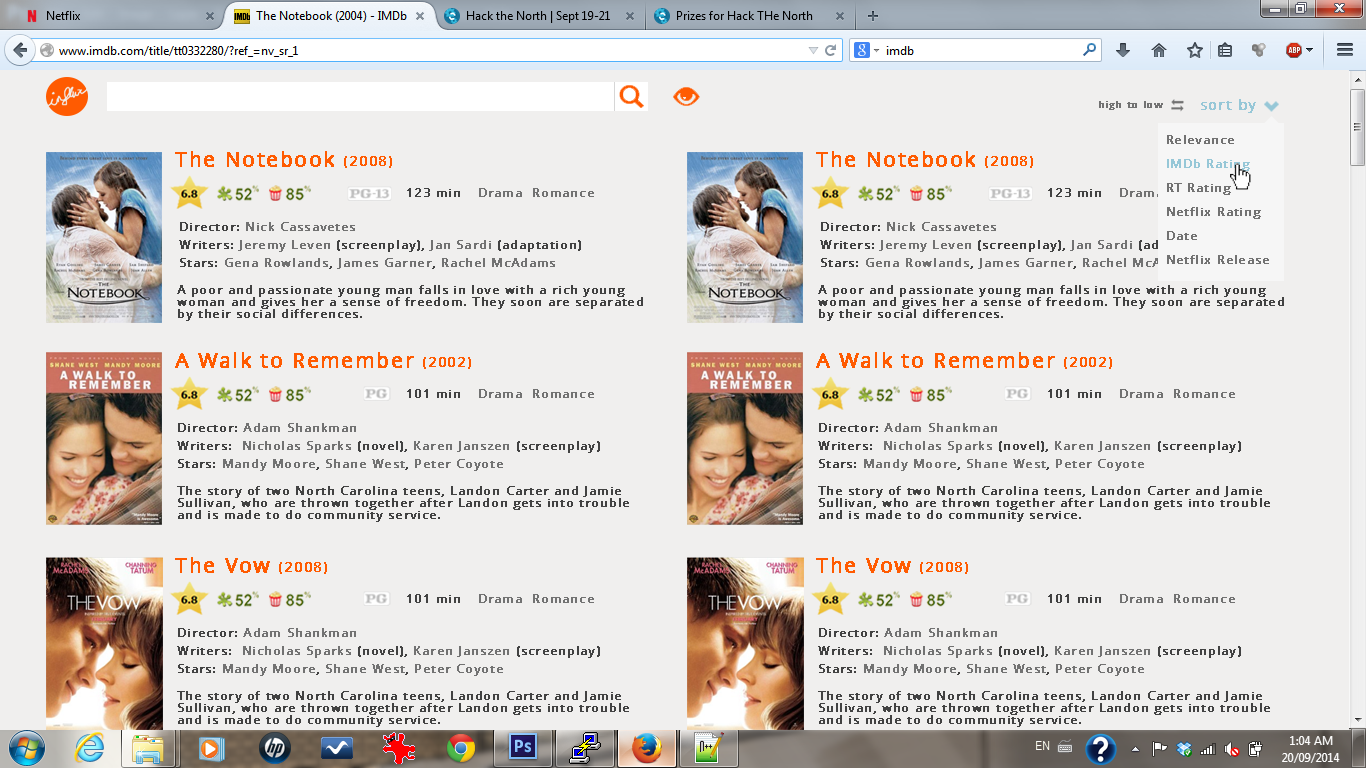
<style>
.page{position:relative;width:1366px;height:768px;background:#f0efee}
.page>*{position:absolute;margin:0}
.t1{font:10px "OpenSans";letter-spacing:0.095em;color:#727272;font-weight:bold}
.t2{font:14px "OpenSans";letter-spacing:0.095em;color:#96c7d7;font-weight:bold}
.t3{font:12px/24px "OpenSans";letter-spacing:0.095em;color:#727272;font-weight:bold}
.t4{font:12px/24px "OpenSans";letter-spacing:0.095em;color:#96c7d7;font-weight:bold}
.t5{font:20px "OpenSans";letter-spacing:0.095em;color:#ff5b01;font-weight:bold}
.t6{font:14px "OpenSans";letter-spacing:0.095em;color:#ff5b01;font-weight:bold}
.t7{font:12px "OpenSans";letter-spacing:0.095em;color:#424242;font-weight:bold}
.t8{font:12px "OpenSans";letter-spacing:0.095em;color:#727272;font-weight:bold}
.t9{font:12px/18px "OpenSans";letter-spacing:0.095em;color:#424242;font-weight:bold}
.t10{font:12px/18px "OpenSans";letter-spacing:0.095em;color:#727272;font-weight:bold}
.t11{font:12px/12px "OpenSans";letter-spacing:0.095em;color:#424242;font-weight:bold}
</style>
<div class="page">
<p class="t1" style="left:1099px;top:101px;width:64px;height:9px">high to low</p>
<p class="t2" style="left:1201px;top:99px;width:55px;height:14px">sort by</p>
<p class="t3" style="left:1167px;top:135px;width:102px;height:129px">Relevance<br><span class="t4">IMDb Rating<br></span>RT Rating<br>Netflix Rating<br>Date<br>Netflix Release</p>
<p class="t5" style="left:175px;top:151px;width:217px;height:17px">The Notebook <span class="t6">(2008)</span></p>
<p class="t5" style="left:816px;top:151px;width:217px;height:17px">The Notebook <span class="t6">(2008)</span></p>
<p class="t7" style="left:407px;top:188px;width:53px;height:9px">123 min</p>
<p class="t8" style="left:479px;top:188px;width:115px;height:9px">Drama  Romance</p>
<p class="t7" style="left:1048px;top:188px;width:53px;height:9px">123 min</p>
<p class="t9" style="left:179px;top:222px;width:402px;height:47px">Director: <span class="t10">Nick Cassavetes<br></span>Writers: <span class="t10">Jeremy Leven</span> (screenplay), <span class="t10">Jan Sardi </span>(adaptation)<br>Stars: <span class="t10">Gena Rowlands</span>, <span class="t10">James Garner</span>, <span class="t10">Rachel McAdams</span></p>
<p class="t9" style="left:820px;top:222px;width:402px;height:47px">Director: <span class="t10">Nick Cassavetes<br></span>Writers: <span class="t10">Jeremy Leven</span> (screenplay), <span class="t10">Jan Sardi </span>(adaptation)<br>Stars: <span class="t10">Gena Rowlands</span>, <span class="t10">James Garner</span>, <span class="t10">Rachel McAdams</span></p>
<p class="t11" style="left:177px;top:285px;width:466px;height:36px">A poor and passionate young man falls in love with a rich young woman and gives her a sense of freedom. They soon are separated by their social differences.</p>
<p class="t11" style="left:818px;top:285px;width:466px;height:36px">A poor and passionate young man falls in love with a rich young woman and gives her a sense of freedom. They soon are separated by their social differences.</p>
<p class="t5" style="left:175px;top:352px;width:296px;height:17px">A Walk to Remember <span class="t6">(2002)</span></p>
<p class="t5" style="left:816px;top:352px;width:296px;height:17px">A Walk to Remember <span class="t6">(2002)</span></p>
<p class="t7" style="left:407px;top:389px;width:53px;height:9px">101 min</p>
<p class="t8" style="left:479px;top:389px;width:115px;height:9px">Drama  Romance</p>
<p class="t7" style="left:1048px;top:389px;width:53px;height:9px">101 min</p>
<p class="t8" style="left:1120px;top:389px;width:115px;height:9px">Drama  Romance</p>
<p class="t9" style="left:177px;top:423px;width:423px;height:48px">Director: <span class="t10">Adam Shankman<br></span>Writers: <span class="t10"> Nicholas Sparks</span> (novel), <span class="t10">Karen Janszen </span>(screenplay)<br>Stars: <span class="t10">Mandy Moore</span>, <span class="t10">Shane West</span>, <span class="t10">Peter Coyote</span></p>
<p class="t9" style="left:818px;top:423px;width:423px;height:48px">Director: <span class="t10">Adam Shankman<br></span>Writers: <span class="t10"> Nicholas Sparks</span> (novel), <span class="t10">Karen Janszen </span>(screenplay)<br>Stars: <span class="t10">Mandy Moore</span>, <span class="t10">Shane West</span>, <span class="t10">Peter Coyote</span></p>
<p class="t11" style="left:177px;top:486px;width:452px;height:36px">The story of two North Carolina teens, Landon Carter and Jamie Sullivan, who are thrown together after Landon gets into trouble and is made to do community service.</p>
<p class="t11" style="left:818px;top:486px;width:452px;height:36px">The story of two North Carolina teens, Landon Carter and Jamie Sullivan, who are thrown together after Landon gets into trouble and is made to do community service.</p>
<p class="t5" style="left:175px;top:557px;width:152px;height:17px">The Vow <span class="t6">(2008)</span></p>
<p class="t5" style="left:816px;top:557px;width:152px;height:17px">The Vow <span class="t6">(2008)</span></p>
<p class="t7" style="left:407px;top:594px;width:53px;height:9px">101 min</p>
<p class="t8" style="left:479px;top:594px;width:115px;height:9px">Drama  Romance</p>
<p class="t7" style="left:1048px;top:594px;width:53px;height:9px">101 min</p>
<p class="t8" style="left:1120px;top:594px;width:115px;height:9px">Drama  Romance</p>
<p class="t9" style="left:177px;top:628px;width:423px;height:48px">Director: <span class="t10">Adam Shankman<br></span>Writers: <span class="t10"> Nicholas Sparks</span> (novel), <span class="t10">Karen Janszen </span>(screenplay)<br>Stars: <span class="t10">Mandy Moore</span>, <span class="t10">Shane West</span>, <span class="t10">Peter Coyote</span></p>
<p class="t9" style="left:818px;top:628px;width:423px;height:48px">Director: <span class="t10">Adam Shankman<br></span>Writers: <span class="t10"> Nicholas Sparks</span> (novel), <span class="t10">Karen Janszen </span>(screenplay)<br>Stars: <span class="t10">Mandy Moore</span>, <span class="t10">Shane West</span>, <span class="t10">Peter Coyote</span></p>
<p class="t11" style="left:177px;top:691px;width:452px;height:36px">The story of two North Carolina teens, Landon Carter and Jamie Sullivan, who are thrown together after Landon gets into trouble and is made to do community service.</p>
<p class="t11" style="left:818px;top:691px;width:452px;height:36px">The story of two North Carolina teens, Landon Carter and Jamie Sullivan, who are thrown together after Landon gets into trouble and is made to do community service.</p>
</div>
